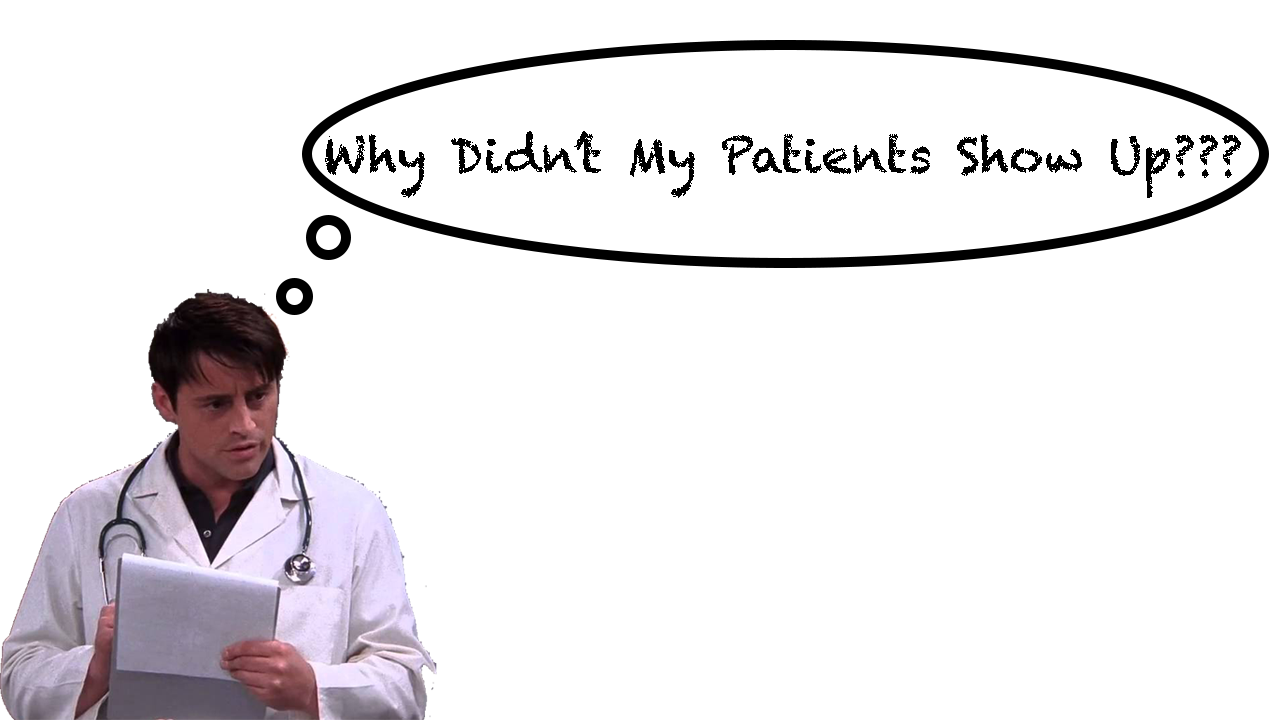
<style>
.page{position:relative;width:1280px;height:720px;background:#ffffff}
.page>*{position:absolute;margin:0}
.t1{font:48px "Chalkduster";color:#000000}
</style>
<div class="page">
<p class="t1" style="left:325px;top:131px;width:916px;height:67px">Why Didn’t My Patients Show Up???</p>
</div>
